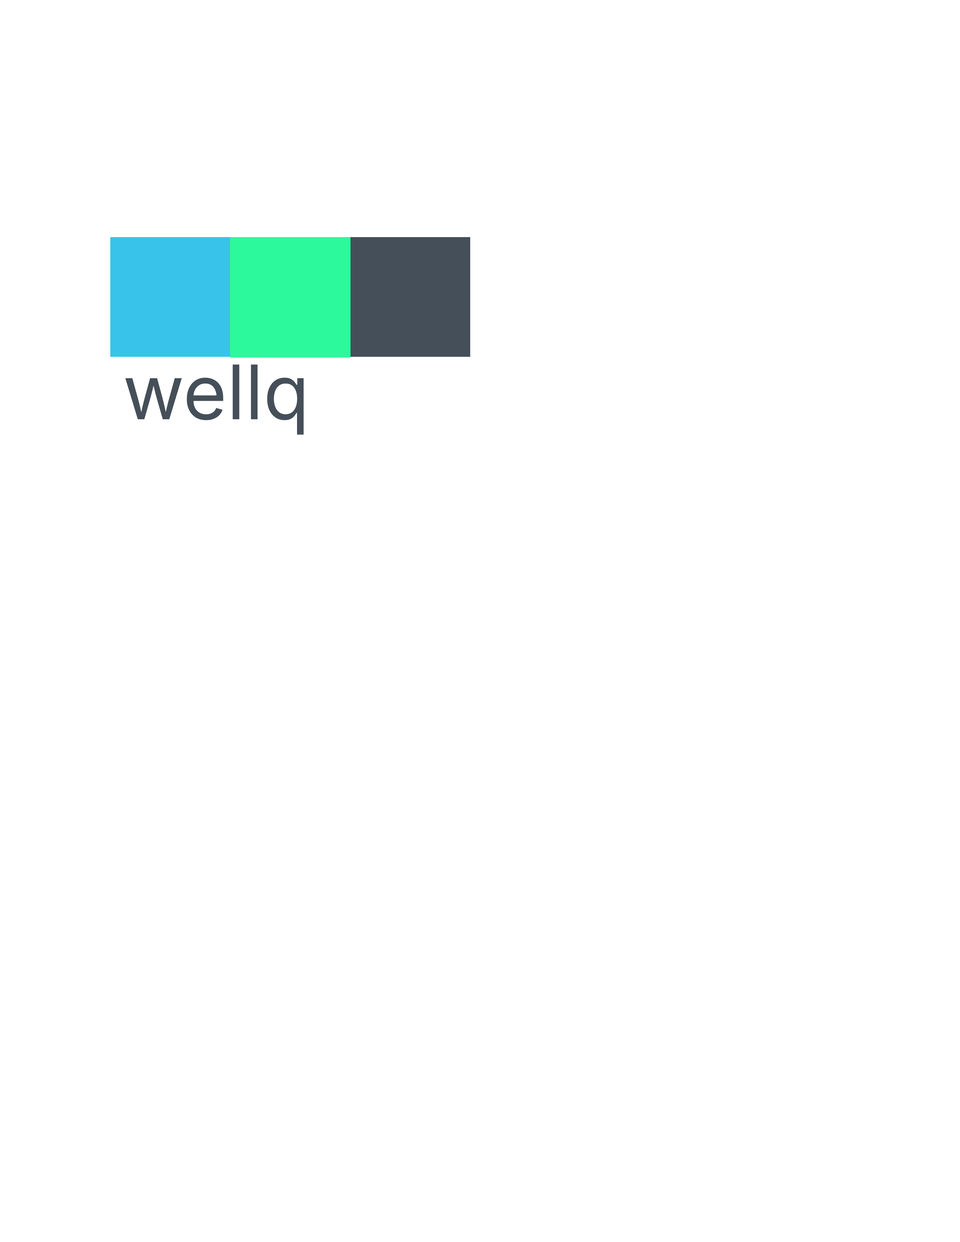
<style>
.page{position:relative;width:960px;height:1242px;background:#ffffff}
.page>*{position:absolute;margin:0}
.t1{font:75.3px "Inter-Regular";color:#454f59}
</style>
<div class="page">
<p class="t1" style="left:125px;top:364px;width:179px;height:71px">wellq</p>
</div>
